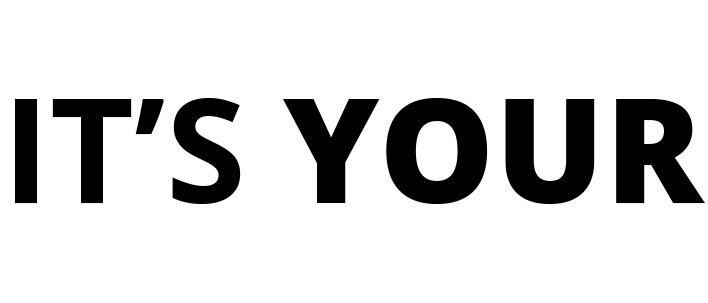
<style>
.page{position:relative;width:708px;height:303px;background:#ffffff}
.page>*{position:absolute;margin:0}
.t1{font:145px "OpenSans-Bold";color:#000000}
.t2{font:145px "OpenSans-Extrabold";color:#000000}
</style>
<div class="page">
<p class="t1" style="left:15px;top:98px;width:690px;height:106px">IT’S<span class="t2"> YOUR</span></p>
</div>
